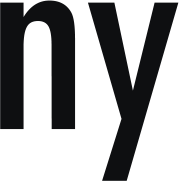
<style>
.page{position:relative;width:179px;height:181px;background:#ffffff}
.page>*{position:absolute;margin:0}
.t1{font:250px "Futura-CondensedMedium";color:#0e0f11}
</style>
<div class="page">
<p class="t1" style="left:0px;top:0px;width:179px;height:181px">ny</p>
</div>
